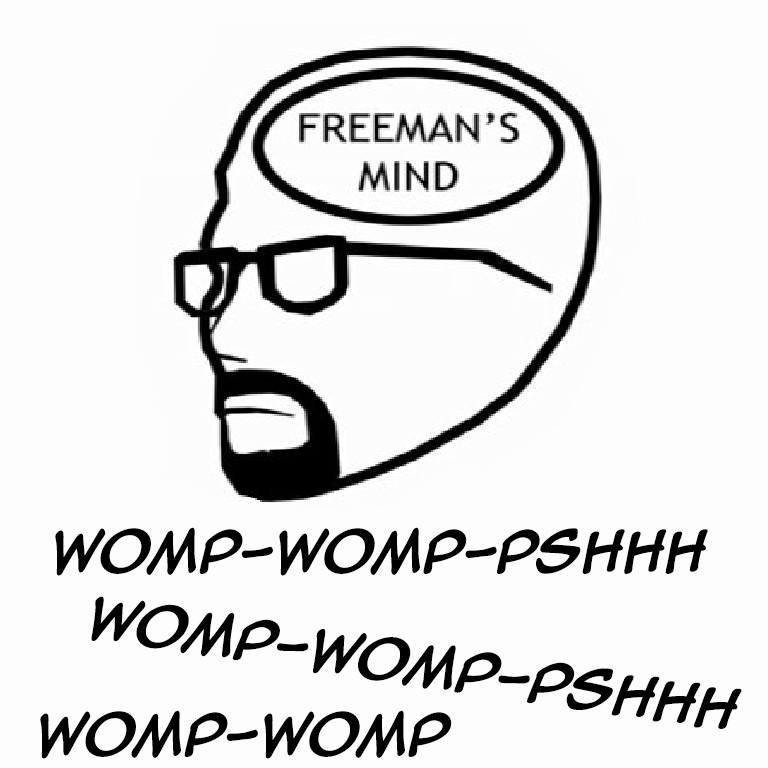
<style>
.page{position:relative;width:768px;height:768px;background:#fdfdfd}
.page>*{position:absolute;margin:0}
.t1{font:47.4px "AnimeAce2.0BB-Bold";letter-spacing:-0.02em;color:#000000}
</style>
<div class="page">
<p class="t1" style="left:55px;top:527px;width:653px;height:49px">womp-womp-Pshhh</p>
<p class="t1" style="left:91px;top:596px;width:651px;height:133px;rotate:8deg">womp-womp-Pshhh</p>
<p class="t1" style="left:40px;top:710px;width:412px;height:49px">womp-womp</p>
</div>
